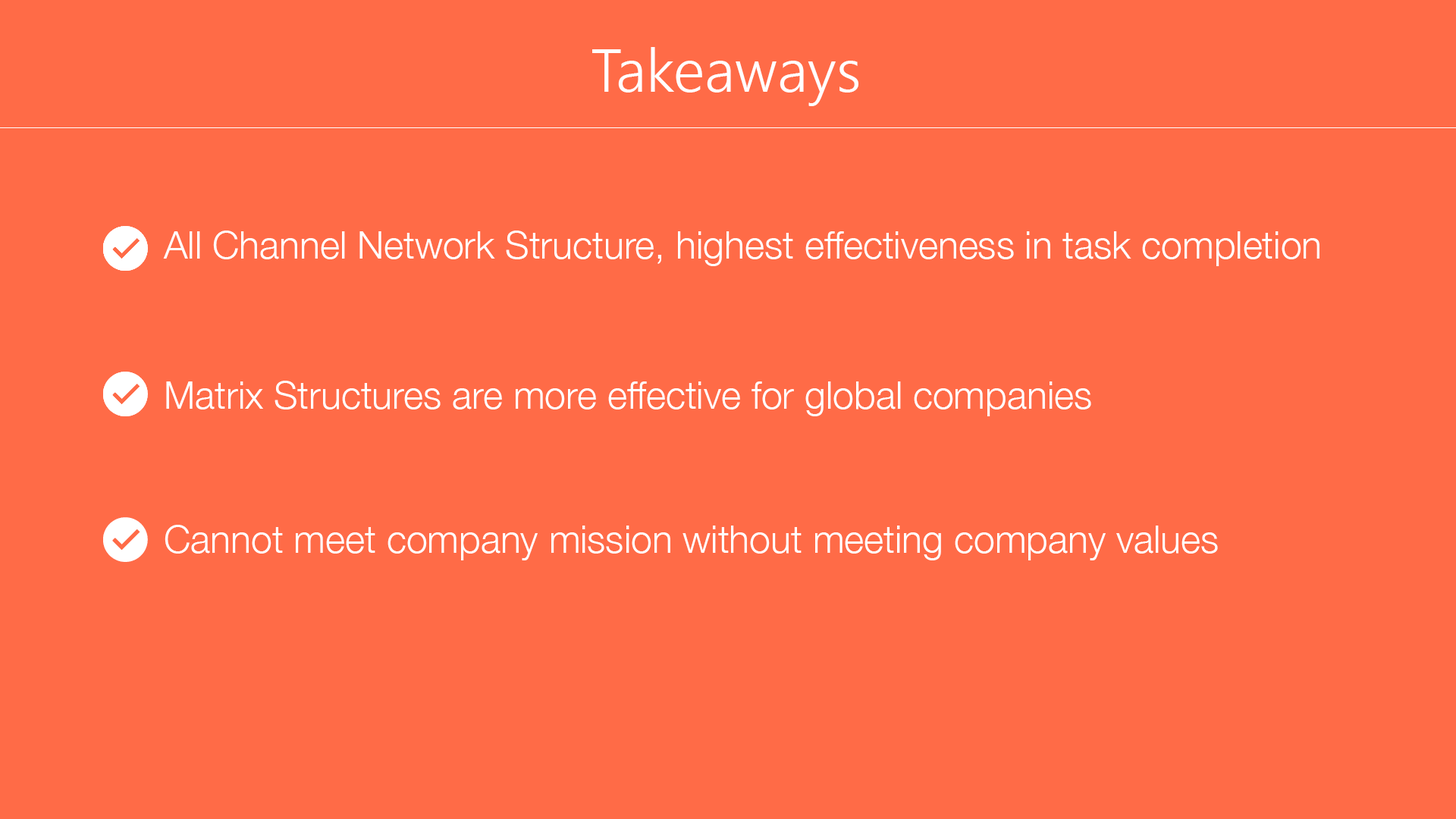
<style>
.page{position:relative;width:1456px;height:819px;background:#ff6b47}
.page>*{position:absolute;margin:0}
.t1{font:60.7px "SegoeUI-Semilight";color:#ffffff}
.t2{font:43.2px "SegoeUI-Semilight";color:#ffffff}
.t3{font:37.9px "HelveticaNeue-Light";color:#ffffff}
</style>
<div class="page">
<p class="t1" style="left:592px;top:47px;width:266px;height:59px"><span class="t2"><br></span><br><br>Takeaways</p>
<p class="t3" style="left:163px;top:231px;width:1156px;height:35px">All Channel Network Structure, highest effectiveness in task completion</p>
<p class="t3" style="left:166px;top:381px;width:925px;height:35px">Matrix Structures are more effective for global companies</p>
<p class="t3" style="left:165px;top:525px;width:1053px;height:35px">Cannot meet company mission without meeting company values</p>
</div>
